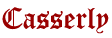
<style>
.page{position:relative;width:112px;height:38px;background:#ffffff}
.page>*{position:absolute;margin:0}
.t1{font:30px "OldEnglishTextMT";color:#990000}
</style>
<div class="page">
<p class="t1" style="left:2px;top:7px;width:107px;height:27px">Casserly</p>
</div>
